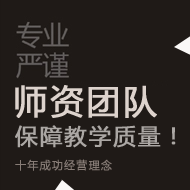
<style>
.page{position:relative;width:190px;height:190px;background:#1f1a17}
.page>*{position:absolute;margin:0}
.t1{font:33.3px "MicrosoftYaHei";letter-spacing:0.075em;color:#ddd3cd;font-weight:bold}
.t2{font:22.2px "MicrosoftYaHei";letter-spacing:0.075em;color:#aba7a4;font-weight:bold}
.t3{font:11.1px "MicrosoftYaHei";letter-spacing:0.075em;color:#877c76;font-weight:bold}
</style>
<div class="page">
<p class="t1" style="left:15px;top:85px;width:142px;height:33px">师资团队</p>
<p class="t2" style="left:15px;top:125px;width:161px;height:23px">保障教学质量！</p>
<p class="t3" style="left:15px;top:159px;width:97px;height:12px">十年成功经营理念</p>
</div>
